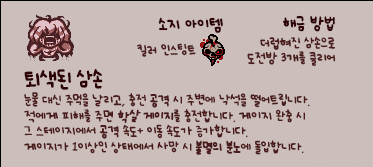
<style>
.page{position:relative;width:373px;height:167px;background:#ccbebb}
.page>*{position:absolute;margin:0}
.t1{font:12px "UhBeeSe_hyunBold";color:#2e0304}
.t2{font:12px "UhBeeSe_hyunBold";letter-spacing:-0.1em;color:#2e0304}
.t3{font:12px "UhBeeSe_hyunBold";letter-spacing:-0.15em;color:#2e0304}
.t4{font:10px/14.5px "UhBeeSe_hyunBold";letter-spacing:-0.025em;color:#4b1c1c}
.t5{font:10px "UhBeeSe_hyunBold";color:#4b1c1c}
.t6{font:10px "UhBeeSe_hyunBold";letter-spacing:-0.1em;color:#4b1c1c}
.t7{font:10px "UhBeeSe_hyunBold";letter-spacing:0.05em;color:#4b1c1c}
.t8{font:10px/15.5px "UhBeeSe_hyunBold";letter-spacing:-0.025em;color:#4b1c1c}
.t9{font:15.2px/24px "UhBeeSe_hyunBold";letter-spacing:-0.1em;color:#2e0304;scale:1.05 1}
.t10{font:16px/24px "UhBeeSe_hyunBold";letter-spacing:-0.05em;color:#2e0304}
.t11{font:16px/24px "UhBeeSe_hyunBold";letter-spacing:-0.025em;color:#2e0304}
.t12{font:10px/16px "UhBeeSe_hyunBold";letter-spacing:-0.025em;color:#4b1c1c}
.t13{font:10px/16px "UhBeeSe_hyunBold";letter-spacing:-0.125em;color:#4b1c1c}
.t14{font:10px/16px "UhBeeSe_hyunBold";letter-spacing:0.005em;color:#4b1c1c}
.t15{font:10px/15.5px "UhBeeSe_hyunBold";letter-spacing:-0.075em;color:#4b1c1c;font-weight:bold;font-style:italic;scale:0.95 1}
.t16{font:11.6px/15.5px "UhBeeSe_hyun";letter-spacing:-0.075em;color:#4b1c1c;font-weight:bold;font-style:italic;scale:0.93 1}
.t17{font:10px/15.5px "UhBeeSe_hyunBold";letter-spacing:-0.075em;color:#4b1c1c;font-style:italic;scale:0.95 1}
.t18{font:10px/15.5px "UhBeeSe_hyunBold";color:#4b1c1c;font-weight:bold;font-style:italic;scale:0.95 1}
.t19{font:10px/15.5px "UhBeeSe_hyunBold";letter-spacing:-0.025em;color:#4b1c1c;font-weight:bold}
</style>
<div class="page">
<p class="t1" style="left:158px;top:17px;width:65px;height:16px"><span class="t2">소</span>지 아이템</p>
<p class="t1" style="left:282px;top:15px;width:53px;height:17px">해금 방<span class="t3">법</span></p>
<p class="t4" style="left:247px;top:36px;width:89px;height:30px;text-align:right">더럽혀진 삼손으로<br>도전방 3개를 클리어</p>
<p class="t5" style="left:137px;top:43px;width:59px;height:14px">킬러 인<span class="t6">스</span><span class="t7">팅</span>트</p>
<p class="t8" style="left:24px;top:69px;width:286px;height:86px"><span class="t9">토</span><span class="t10">ㅣ</span><span class="t11">색</span><span class="t10">된 삼손<br></span><span class="t12">눈물 대신 </span><span class="t13">주</span><span class="t14">먹</span><span class="t12">을 날리고, 충전 공격 시 주변에 낙석을 떨어트립니다.<br></span>적에게 피해를 주면 <span class="t15">학</span><span class="t16">살</span><span class="t17"> 게</span><span class="t15">이</span><span class="t18">지</span>를 충전합니다. 게이지 완충 시<br>그 스테이지에서 공격 속도+ 이동 속도가 증가합니다.<br>게이지가 1이상인 상태에서 사망 시 <span class="t19">불멸의 분노</span>에 돌입합니다.</p>
</div>
